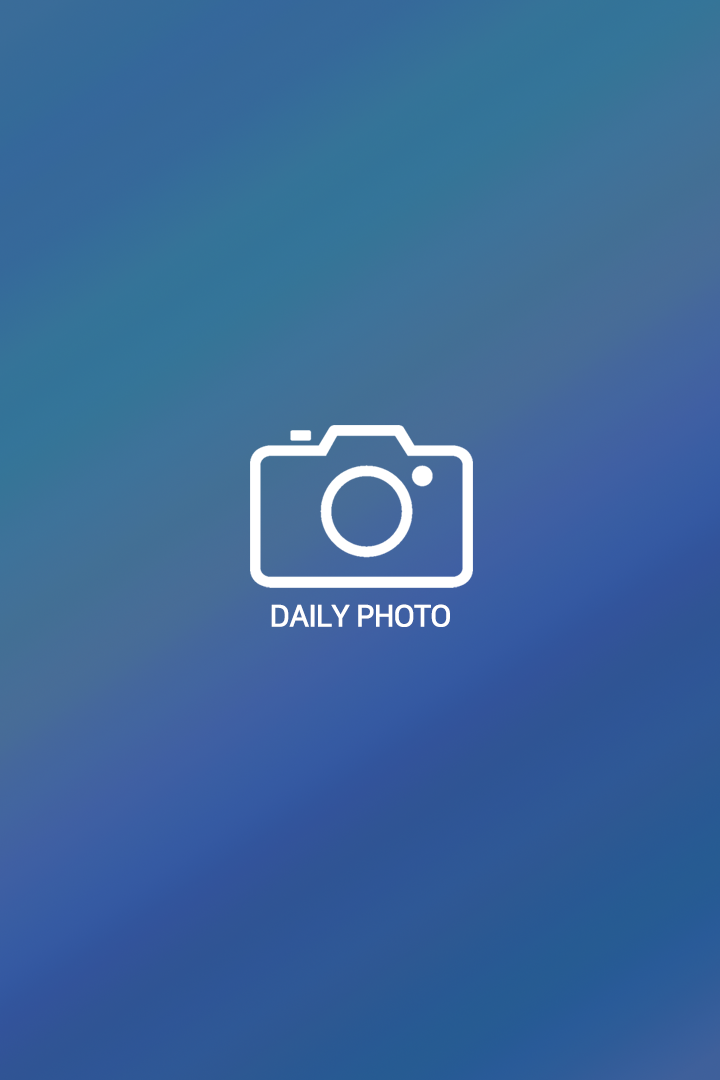
<style>
.page{position:relative;width:720px;height:1080px}
.page>*{position:absolute;margin:0}
.t1{font:29.8px "NanumSquareB";letter-spacing:-0.05em;color:#ffffff;font-weight:bold}
</style>
<div class="page">
<p class="t1" style="left:271px;top:604px;width:179px;height:23px">DAILY PHOTO</p>
</div>
